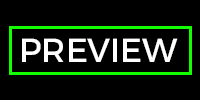
<style>
.page{position:relative;width:200px;height:100px;background:#000000}
.page>*{position:absolute;margin:0}
.t1{font:33.3px "Alexandria-Regular";color:#ffffff}
</style>
<div class="page">
<p class="t1" style="left:22px;top:38px;width:156px;height:24px">PREVIEW</p>
</div>
